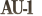
<style>
.page{position:relative;width:42px;height:16px;background:#ffffff}
.page>*{position:absolute;margin:0}
.t1{font:18px "RyuminPro-ExBold";letter-spacing:-0.08em;color:#4a3f32;font-weight:bold;scale:0.9 1}
</style>
<div class="page">
<p class="t1" style="left:0px;top:0px;width:34px;height:15px">AU-1</p>
</div>
